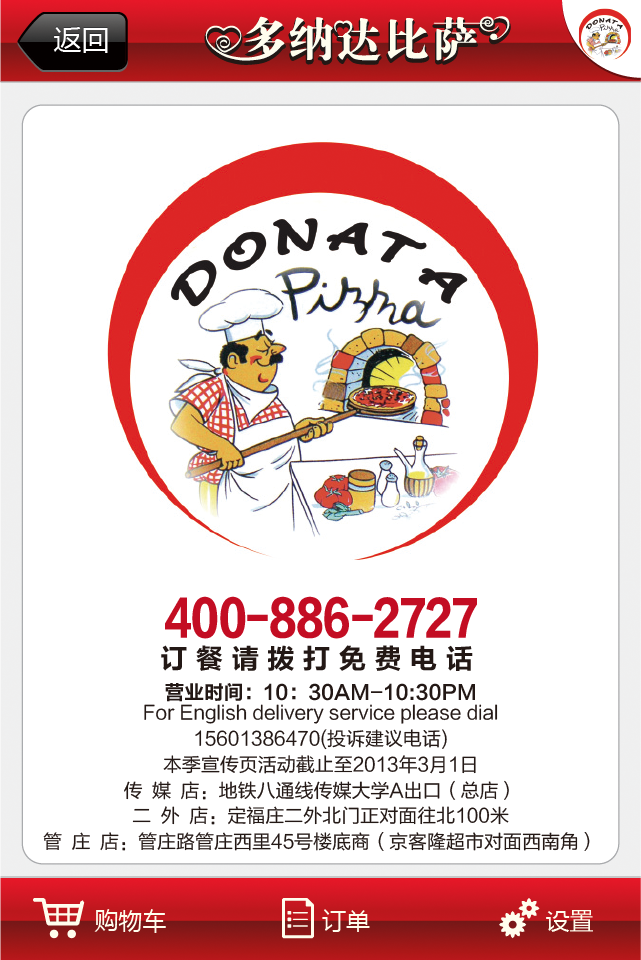
<style>
.page{position:relative;width:641px;height:960px;background:#ffffff}
.page>*{position:absolute;margin:0}
.t1{font:28px "MicrosoftYaHei"}
.t2{font:28px "MicrosoftYaHei";color:#ffffff}
.t3{font:46.8px "FZLTTHK--GBK1-0";color:#c30d23;scale:0.8 1}
.t4{font:27.9px "FZLTCHK--GBK1-0";letter-spacing:0.28em;color:#231815}
.t5{font:19.8px "FZLTCHK--GBK1-0";color:#231815}
.t6{font:19px/25.9px "FZLTHK--GBK1-0";color:#231815}
.t7{font:24px "MicrosoftYaHei";color:#fffeee}
</style>
<div class="page">
<p class="t1" style="left:53px;top:26px;width:55px;height:26px">返回</p>
<p class="t2" style="left:53px;top:27px;width:55px;height:26px">返回</p>
<p class="t3" style="left:165px;top:596px;width:312px;height:43px">400-886-2727</p>
<p class="t4" style="left:161px;top:645px;width:312px;height:26px">订餐请拨打免费电话</p>
<p class="t5" style="left:165px;top:683px;width:310px;height:19px">营业时间：10：30AM-10:30PM</p>
<p class="t6" style="left:43px;top:704px;width:547px;height:147px;text-align:center">For English delivery service please dial<br> 15601386470(投诉建议电话) <br>本季宣传页活动截止至2013年3月1日<br>传 媒 店：地铁八通线传媒大学A出口（总店）<br>二 外 店：定福庄二外北门正对面往北100米<br>管 庄 店：管庄路管庄西里45号楼底商（京客隆超市对面西南角）</p>
<p class="t7" style="left:94px;top:909px;width:72px;height:24px">购物车</p>
<p class="t7" style="left:322px;top:909px;width:48px;height:23px">订单</p>
<p class="t7" style="left:546px;top:910px;width:47px;height:22px">设置</p>
</div>
